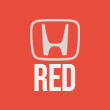
<style>
.page{position:relative;width:110px;height:110px;background:#e74c3c}
.page>*{position:absolute;margin:0}
.t1{font:37.5px "BebasNeue-Regular";color:#ecf0f1}
</style>
<div class="page">
<p class="t1" style="left:34px;top:64px;width:42px;height:27px">RED</p>
</div>
